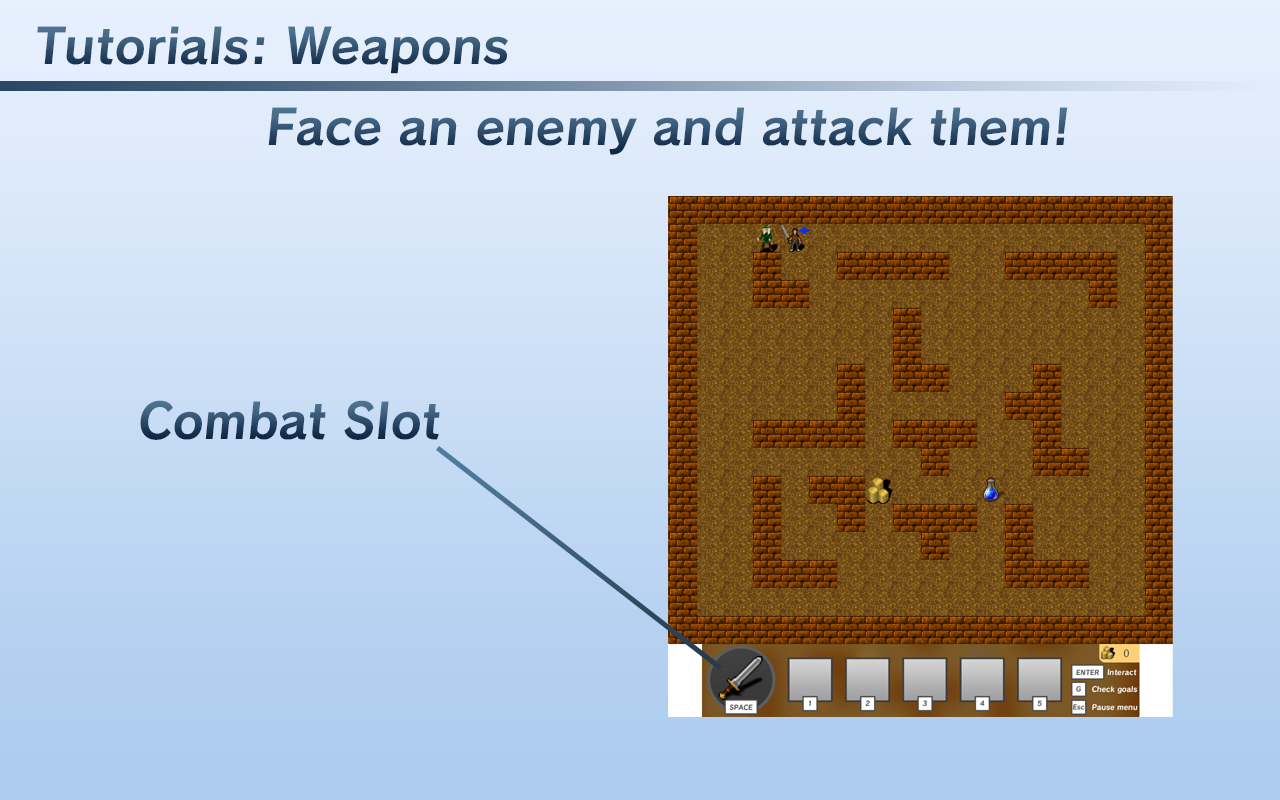
<style>
.page{position:relative;width:1280px;height:800px}
.page>*{position:absolute;margin:0}
.t1{font:48px "Calamity-Bold"}
</style>
<div class="page">
<p class="t1" style="left:37px;top:26px;width:471px;height:48px">Tutorials: Weapons</p>
<p class="t1" style="left:268px;top:107px;width:800px;height:48px">Face an enemy and attack them!</p>
<p class="t1" style="left:140px;top:400px;width:300px;height:40px">Combat Slot</p>
</div>
